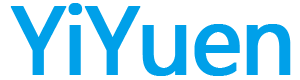
<style>
.page{position:relative;width:300px;height:80px;background:#ffffff}
.page>*{position:absolute;margin:0}
.t1{font:90px "MicrosoftYaHei";letter-spacing:-0.05em;color:#00a0e9;font-weight:bold}
</style>
<div class="page">
<p class="t1" style="left:10px;top:3px;width:281px;height:73px">YiYuen</p>
</div>
